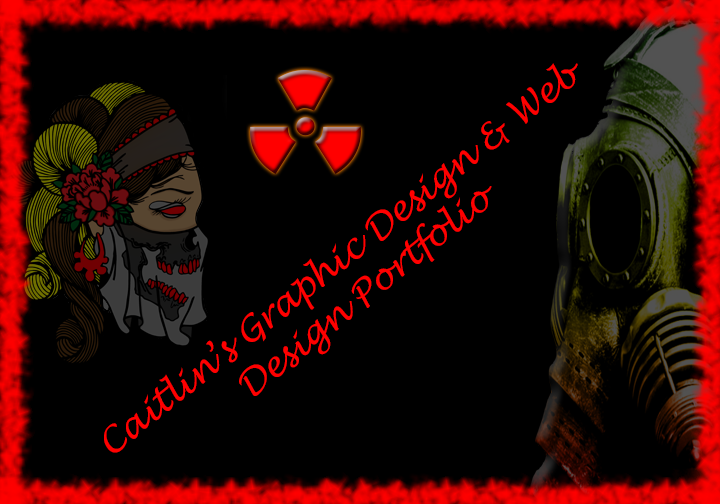
<style>
.page{position:relative;width:720px;height:504px;background:#000000}
.page>*{position:absolute;margin:0}
.t1{font:35.1px "LucidaHandwriting-Italic";color:#ff0000}
</style>
<div class="page">
<p class="t1" style="left:104px;top:63px;width:474px;height:390px;rotate:-39deg">Caitlin’s Graphic Design &amp; Web Design Portfolio</p>
</div>
